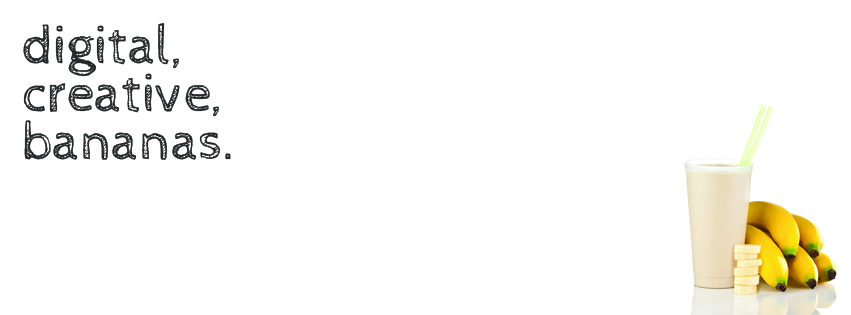
<style>
.page{position:relative;width:851px;height:315px;background:#ffffff}
.page>*{position:absolute;margin:0}
.t1{font:55px/48px "CabinSketch-Regular";color:#242828}
</style>
<div class="page">
<p class="t1" style="left:23px;top:23px;width:208px;height:137px">digital,<br>creative,<br>bananas.</p>
</div>
